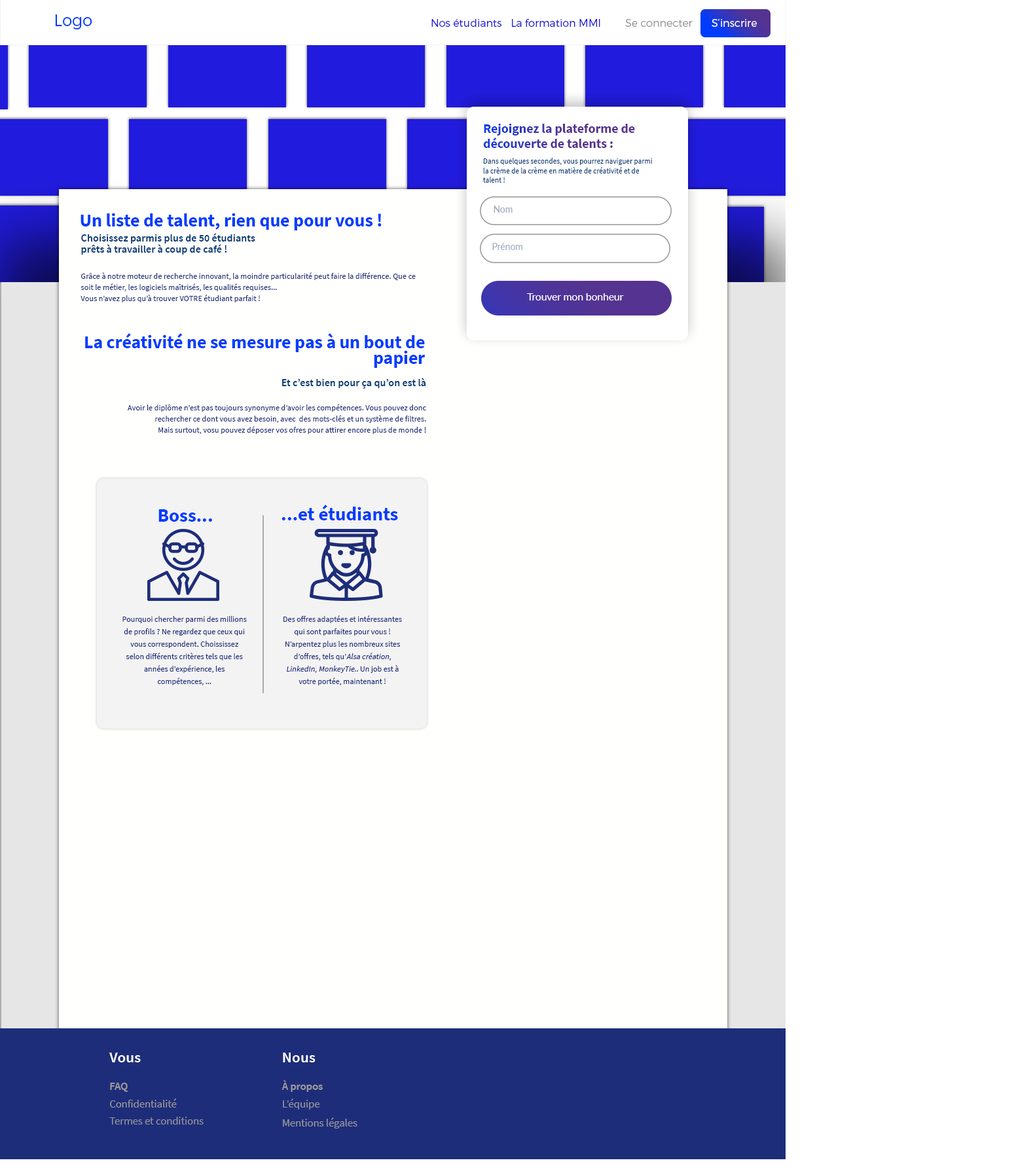
<style>
.page{position:relative;width:1016px;height:1173px;background:#fffffd}
.page>*{position:absolute;margin:0}
.t1{font:16.4px "Montserrat-Light";color:#003cff}
.t2{font:10.5px "Montserrat-Light";color:#211bdd}
.t3{font:10.5px "Montserrat-Light";color:#999999}
.t4{font:10.5px "Montserrat-Light";color:#ffffff}
.t5{font:13.4px/15px "SourceSansPro-Bold";scale:0.97 1}
.t6{font:7.7px "SourceSansPro-Regular";color:#083d77;scale:0.97 1}
.t7{font:9.4px "Lato-Regular";color:#a4afc2;scale:0.97 1}
.t8{font:18.2px "SourceSansPro-Bold";color:#003cff}
.t9{font:10.6px/11.3px "SourceSansPro-Semibold";color:#083d77}
.t10{font:8.1px/11.3px "SourceSansPro-Regular";color:#1e2d7a}
.t11{font:10.5px "Lato-Regular";color:#ffffff;scale:0.97 1}
.t12{font:18.2px/16.2px "SourceSansPro-Bold";color:#003cff}
.t13{font:10.6px "SourceSansPro-Semibold";color:#083d77}
.t14{font:18.9px "SourceSansPro-Bold";color:#003cff}
.t15{font:8px/12.4px "SourceSansPro-Regular";color:#1e2d7a}
.t16{font:8px/12.4px "SourceSansPro-Regular";color:#1e2d7a;font-style:italic}
.t17{font:15.4px "SourceSansPro-Semibold";color:#ffffff}
.t18{font:10.8px "SourceSansPro-Semibold";color:#999999}
.t19{font:10.8px "SourceSansPro-Regular";color:#999999}
.t20{font:10.8px "SourceSansPro-Regular";color:#929497}
</style>
<div class="page">
<p class="t1" style="left:55px;top:14px;width:37px;height:15px">Logo</p>
<p class="t2" style="left:432px;top:19px;width:70px;height:8px">Nos étudiants</p>
<p class="t2" style="left:512px;top:19px;width:88px;height:8px">La formation MMI</p>
<p class="t3" style="left:625px;top:19px;width:68px;height:8px">Se connecter</p>
<p class="t4" style="left:712px;top:19px;width:45px;height:8px">S’inscrire</p>
<p class="t5" style="left:483px;top:124px;width:152px;height:24px">Rejoignez la plateforme de découverte de talents :</p>
<p class="t6" style="left:483px;top:158px;width:170px;height:25px">Dans quelques secondes, vous pourrez naviguer parmi la crème de la crème en matière de créativité et de talent !</p>
<p class="t7" style="left:494px;top:206px;width:19px;height:7px">Nom</p>
<p class="t8" style="left:81px;top:213px;width:301px;height:17px">Un liste de talent, rien que pour vous !</p>
<p class="t9" style="left:81px;top:233px;width:174px;height:22px">Choisissez parmis plus de 50 étudiants<br>prêts à travailler à coup de café !</p>
<p class="t7" style="left:492px;top:243px;width:31px;height:7px">Prénom</p>
<p class="t10" style="left:81px;top:272px;width:335px;height:31px">Grâce à notre moteur de recherche innovant, la moindre particularité peut faire la différence. Que ce soit le métier, les logiciels maîtrisés, les qualités requises...<br>Vous n’avez plus qu’à trouver VOTRE étudiant parfait !</p>
<p class="t11" style="left:527px;top:293px;width:97px;height:8px">Trouver mon bonheur</p>
<p class="t12" style="left:85px;top:333px;width:341px;height:35px;text-align:right">La créativité ne se mesure pas à un bout de papier</p>
<p class="t13" style="left:282px;top:378px;width:144px;height:11px">Et c’est bien pour ça qu’on est là</p>
<p class="t10" style="left:127px;top:404px;width:299px;height:30px;text-align:right">Avoir le diplôme n’est pas toujours synonyme d’avoir les compétences. Vous pouvez donc rechercher ce dont vous avez besoin, avec  des mots-clés et un système de filtres.<br>Mais surtout, vosu pouvez déposer vos ofres pour attirer encore plus de monde !</p>
<p class="t14" style="left:158px;top:509px;width:54px;height:13px">Boss...</p>
<p class="t14" style="left:282px;top:505px;width:116px;height:16px">...et étudiants</p>
<p class="t15" style="left:122px;top:616px;width:125px;height:70px;text-align:center">Pourquoi chercher parmi des millions de profils ? Ne regardez que ceux qui vous correspondent. Choississez selon différents critères tels que les années d’expérience, les compétences, ...</p>
<p class="t15" style="left:284px;top:616px;width:118px;height:70px;text-align:center">Des offres adaptées et intéressantes qui sont parfaites pour vous ! N’arpentez plus les nombreux sites d’offres, tels qu’<span class="t16">Alsa création</span>,<span class="t16"> LinkedIn</span>, <span class="t16">MonkeyTie</span>.. Un job est à votre portée, maintenant !</p>
<p class="t17" style="left:109px;top:1053px;width:32px;height:10px">Vous</p>
<p class="t17" style="left:283px;top:1053px;width:33px;height:10px">Nous</p>
<p class="t18" style="left:110px;top:1083px;width:18px;height:9px">FAQ</p>
<p class="t18" style="left:282px;top:1080px;width:41px;height:12px">À propos</p>
<p class="t19" style="left:110px;top:1099px;width:67px;height:9px">Confidentialité</p>
<p class="t19" style="left:283px;top:1099px;width:37px;height:11px">L’équipe</p>
<p class="t20" style="left:109px;top:1117px;width:95px;height:8px">Termes et conditions</p>
<p class="t19" style="left:283px;top:1118px;width:75px;height:11px">Mentions légales</p>
</div>
